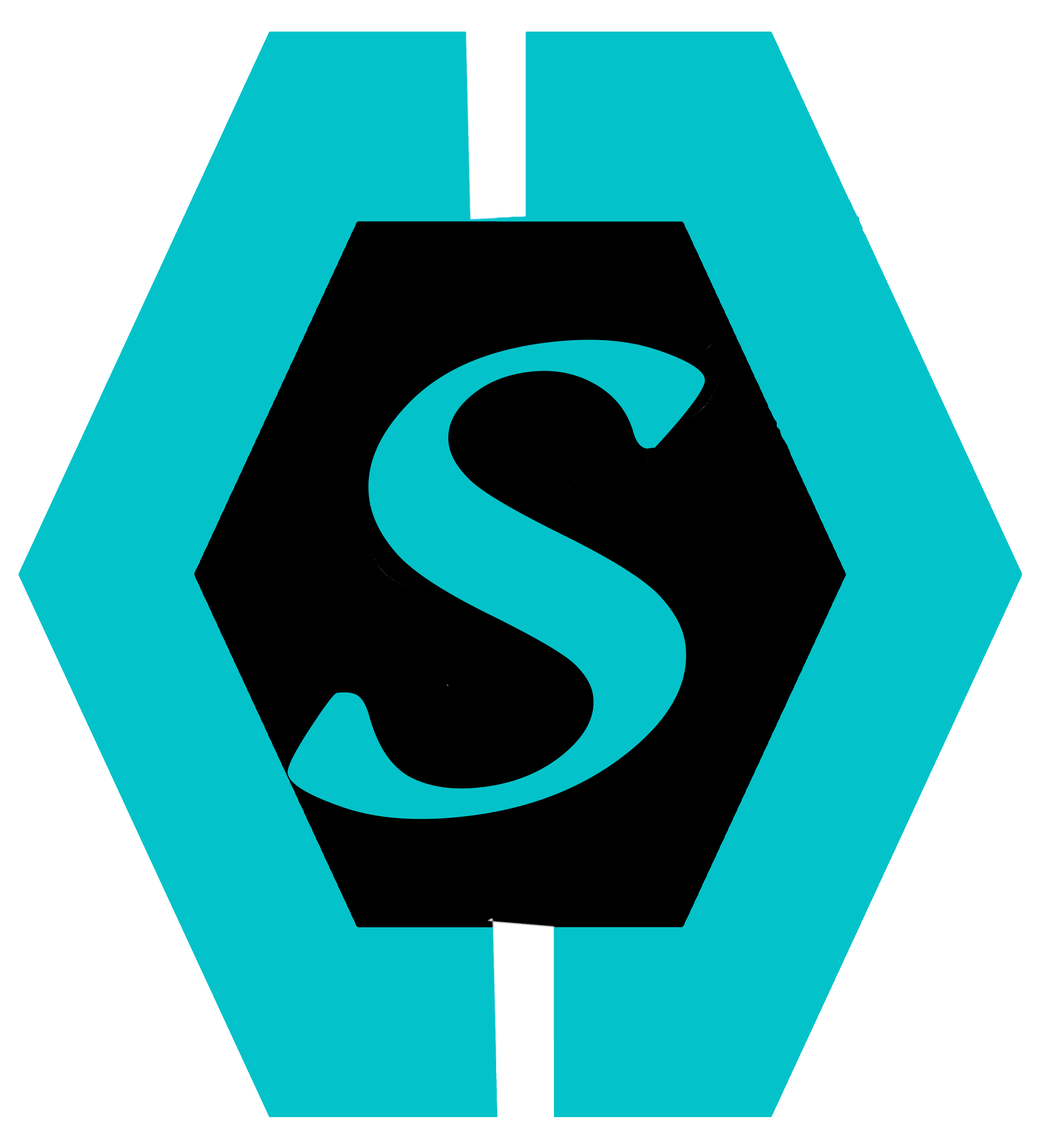
<style>
.page{position:relative;width:1051px;height:1135px;background:#04c2c9}
.page>*{position:absolute;margin:0}
.t1{font:649.5px "ScriptMTBold";color:#04c2c9;scale:1.43 1}
</style>
<div class="page">
<p class="t1" style="left:287px;top:340px;width:418px;height:479px;rotate:-7deg">S</p>
</div>
